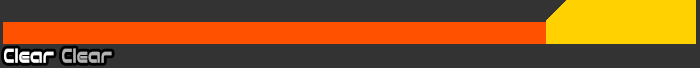
<style>
.page{position:relative;width:700px;height:68px;background:#333333}
.page>*{position:absolute;margin:0}
.t1{font:24px "NicoKaku";color:#ffffff;scale:0.67 1}
.t2{font:24px "NicoKaku";color:#b2b2b2;scale:0.67 1}
</style>
<div class="page">
<p class="t1" style="left:4px;top:48px;width:50px;height:15px">Clear</p>
<p class="t2" style="left:62px;top:48px;width:50px;height:15px">Clear</p>
</div>
